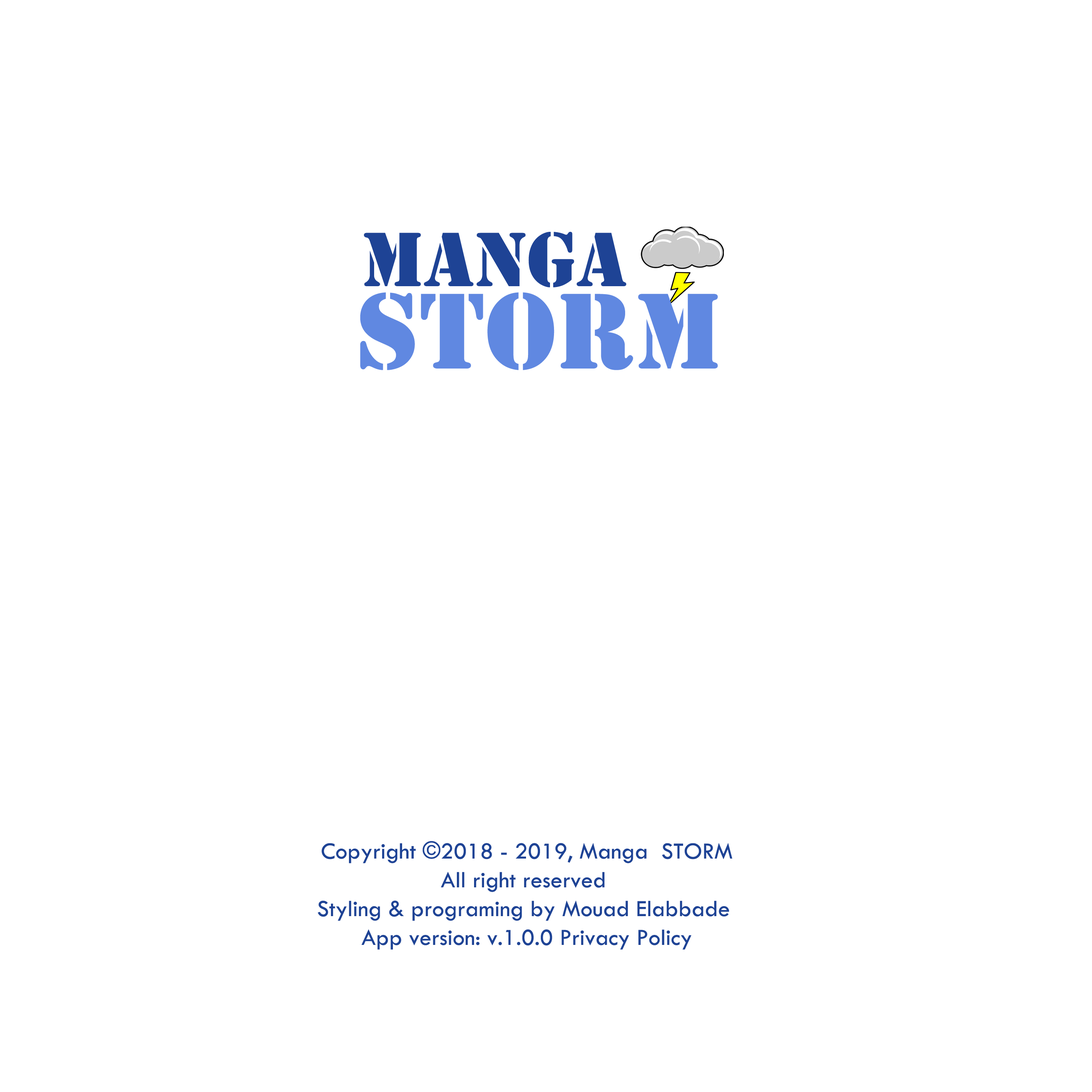
<style>
.page{position:relative;width:1092px;height:1092px;background:#ffffff}
.page>*{position:absolute;margin:0}
.t1{font:79.9px "Stencil";color:#1e4395}
.t2{font:111.9px "Stencil";color:#6088e1}
.t3{font:24px "TwCenMT-Regular";color:#1e4395}
</style>
<div class="page">
<p class="t1" style="left:364px;top:232px;width:262px;height:55px">manga</p>
<p class="t2" style="left:360px;top:292px;width:358px;height:78px">Storm</p>
<p class="t3" style="left:318px;top:841px;width:414px;height:109px;text-align:center">Copyright ©2018 - 2019, Manga  STORM<br>All right reserved <br>Styling &amp; programing by Mouad Elabbade <br>App version: v.1.0.0 Privacy Policy</p>
</div>
